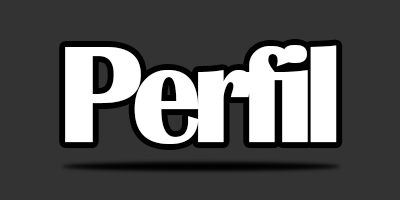
<style>
.page{position:relative;width:400px;height:200px;background:#333333}
.page>*{position:absolute;margin:0}
.t1{font:243.3px "BritannicBold";letter-spacing:-0.075em;color:#ffffff}
</style>
<div class="page">
<p class="t1" style="left:65px;top:45px;width:272px;height:99px">Perfil</p>
</div>
